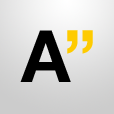
<style>
.page{position:relative;width:114px;height:114px}
.page>*{position:absolute;margin:0}
.t1{font:72px "HelveticaNeue-Bold";color:#000000}
.t2{font:72px "HelveticaNeue-Bold";color:#fecb00}
</style>
<div class="page">
<p class="t1" style="left:20px;top:30px;width:51px;height:52px">A</p>
<p class="t2" style="left:67px;top:30px;width:26px;height:24px;rotate:180deg">“</p>
</div>
